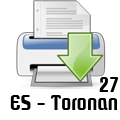
<style>
.page{position:relative;width:120px;height:120px;background:#ffffff}
.page>*{position:absolute;margin:0}
.t1{font:20px "PhrasticMedium";color:#000000}
</style>
<div class="page">
<p class="t1" style="left:99px;top:77px;width:20px;height:15px">27</p>
<p class="t1" style="left:10px;top:95px;width:107px;height:15px">ES - Toronan</p>
</div>
